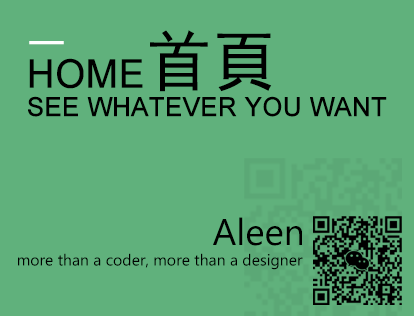
<style>
.page{position:relative;width:414px;height:316px;background:#60b17c}
.page>*{position:absolute;margin:0}
.t1{font:66px "SimHei";color:#000000}
.t2{font:52px "SimHei";color:#ffffff;scale:1.49 1}
.t3{font:39.6px "ArialMT";color:#000000;font-weight:bold;scale:0.96 1}
.t4{font:26.1px "ArialMT";color:#000000;font-weight:bold}
.t5{font:36.9px "MicrosoftNewTaiLue";color:#000000}
.t6{font:15.8px "MicrosoftNewTaiLue";color:#000000}
</style>
<div class="page">
<p class="t1" style="left:150px;top:30px;width:122px;height:62px">首頁</p>
<p class="t2" style="left:29px;top:41px;width:35px;height:4px">-</p>
<p class="t3" style="left:29px;top:58px;width:114px;height:31px">HOME</p>
<p class="t4" style="left:28px;top:96px;width:359px;height:21px">SEE WHATEVER YOU WANT</p>
<p class="t5" style="left:213px;top:217px;width:89px;height:29px">Aleen</p>
<p class="t6" style="left:18px;top:253px;width:285px;height:17px">more than a coder, more than a designer</p>
</div>
